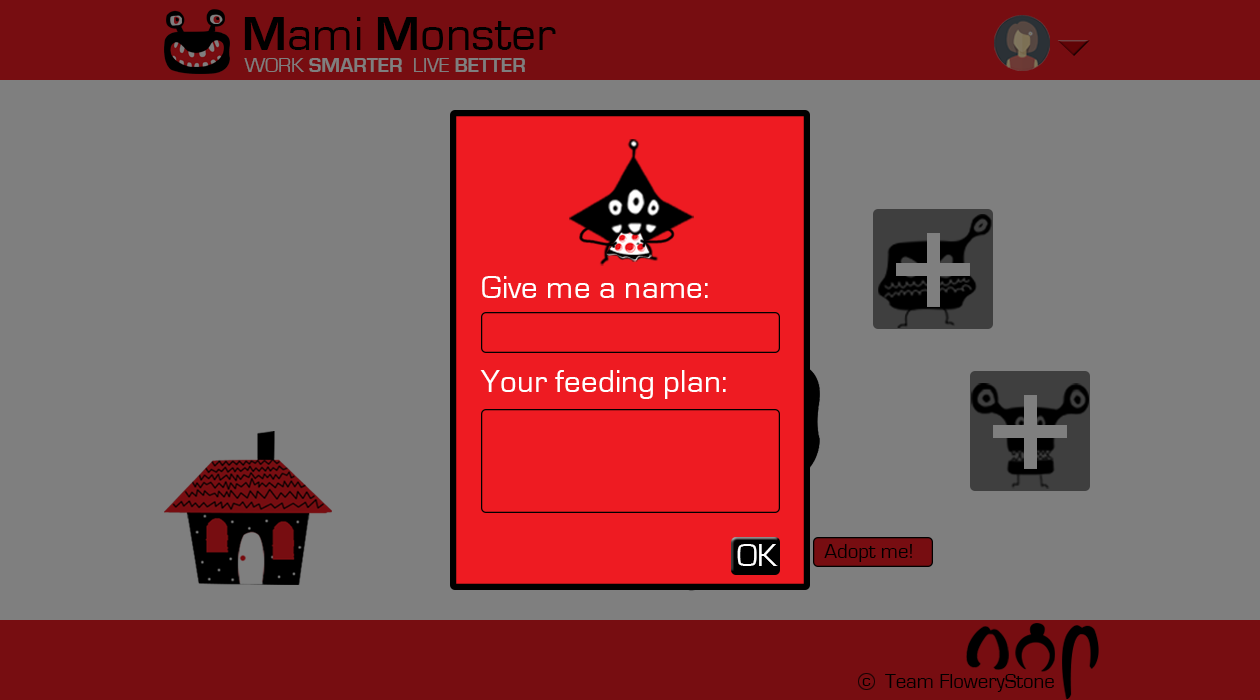
<style>
.page{position:relative;width:1260px;height:700px;background:#7f7f7f}
.page>*{position:absolute;margin:0}
.t1{font:50px "EurostileRegular";color:#000000}
.t2{font:50px "EurostileBold";color:#000000}
.t3{font:20.8px "EurostileBold";color:#7f7f7f}
.t4{font:20.8px "EurostileRegular";color:#7f7f7f}
.t5{font:33.3px "EurostileRegular";color:#ffffff}
.t6{font:20.8px "EurostileRegular";color:#000000}
.t7{font:17.7px "EurostileRegular";color:#000000}
</style>
<div class="page">
<p class="t1" style="left:244px;top:17px;width:312px;height:33px"><span class="t2">M</span>ami <span class="t2">M</span>onster</p>
<p class="t3" style="left:244px;top:58px;width:281px;height:14px"><span class="t4">WORK </span>SMARTER  <span class="t4">LIVE </span>BETTER</p>
<p class="t5" style="left:482px;top:276px;width:226px;height:22px">Give me a name:</p>
<p class="t5" style="left:480px;top:370px;width:246px;height:29px">Your feeding plan:</p>
<p class="t5" style="left:737px;top:544px;width:41px;height:22px">OK</p>
<p class="t6" style="left:824px;top:544px;width:88px;height:18px">Adopt me!</p>
<p class="t7" style="left:862px;top:678px;width:9px;height:8px">c</p>
<p class="t6" style="left:885px;top:674px;width:169px;height:18px">Team FloweryStone</p>
</div>
